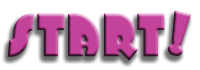
<style>
.page{position:relative;width:200px;height:70px;background:#ffffff}
.page>*{position:absolute;margin:0}
.t1{font:55px "ArbuckleFat";letter-spacing:0.03em;color:#c3429a;font-weight:bold;scale:0.91 1}
</style>
<div class="page">
<p class="t1" style="left:7px;top:10px;width:184px;height:50px">Start!</p>
</div>
